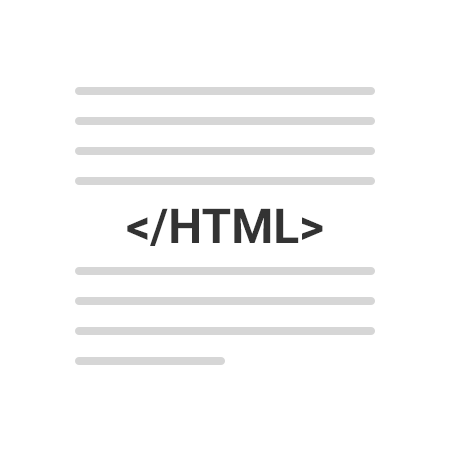
<style>
.page{position:relative;width:450px;height:450px;background:#ffffff}
.page>*{position:absolute;margin:0}
.t1{font:48px "Roboto-Bold";color:#333333}
</style>
<div class="page">
<p class="t1" style="left:127px;top:208px;width:196px;height:38px">&lt;/HTML&gt;</p>
</div>
